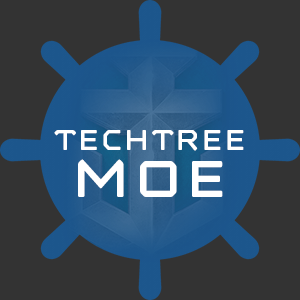
<style>
.page{position:relative;width:300px;height:300px;background:#333333}
.page>*{position:absolute;margin:0}
.t1{font:29.2px "MashineRounded-Regular";color:#ffffff}
.t2{font:56.5px "MashineRounded-Regular";color:#ffffff}
</style>
<div class="page">
<p class="t1" style="left:54px;top:130px;width:190px;height:21px">TechTree</p>
<p class="t2" style="left:78px;top:159px;width:145px;height:38px">Moe</p>
</div>
